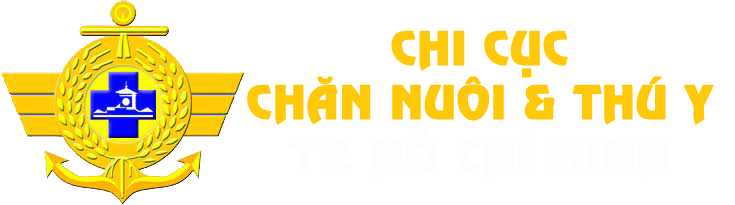
<style>
.page{position:relative;width:735px;height:205px;background:#ffffff}
.page>*{position:absolute;margin:0}
.t1{font:45px "UVNNguyenDu";color:#ffc808;text-transform:uppercase;font-weight:bold}
.t2{font:45px "UVNNguyenDu";color:#fcfdff;text-transform:uppercase;font-weight:bold}
</style>
<div class="page">
<p class="t1" style="left:247px;top:30px;width:467px;height:149px;text-align:center">chi cục<br>chăn nuôi &amp; thú y<br><span class="t2">tp. Hồ Chí Minh</span></p>
</div>
